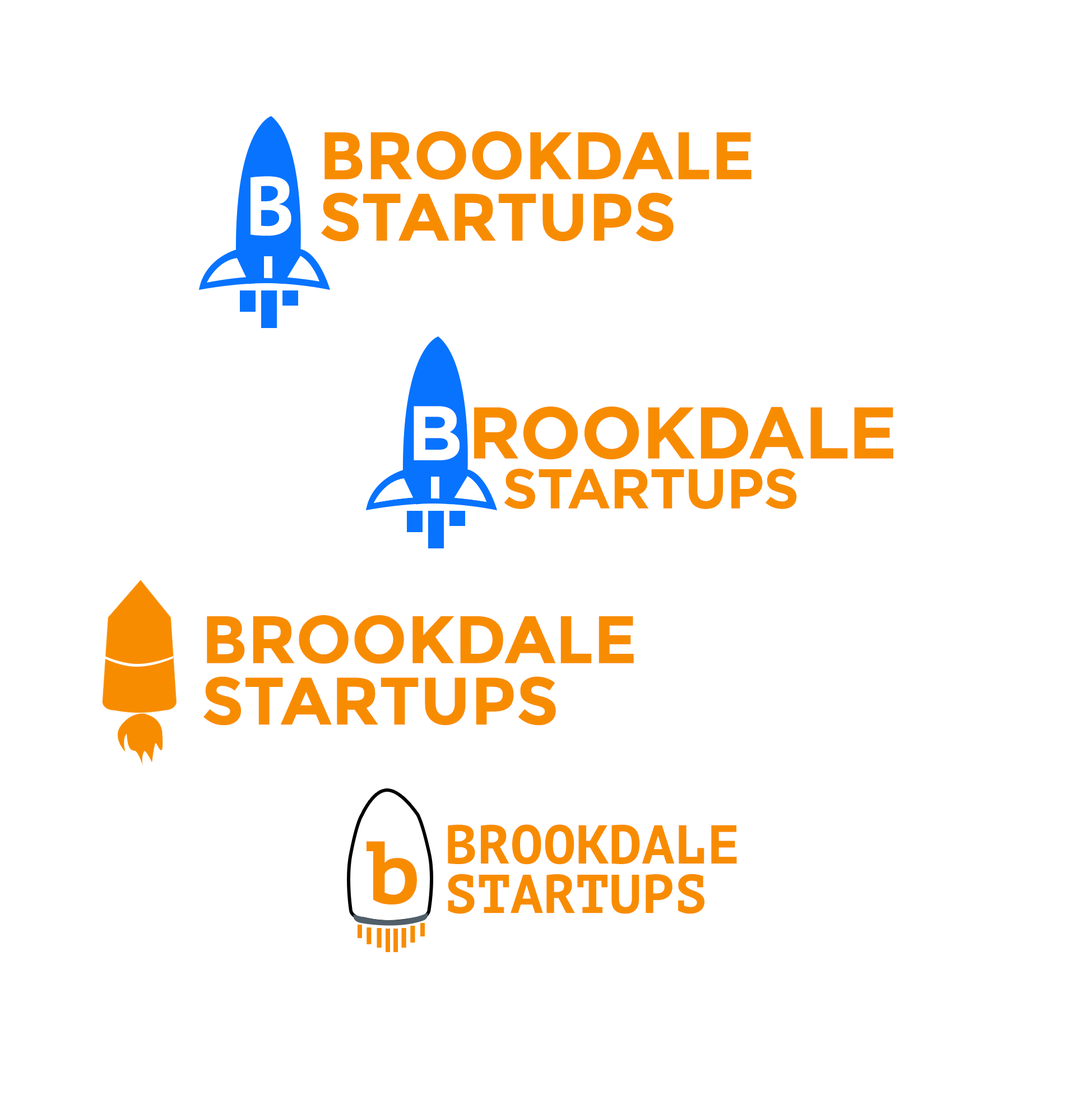
<style>
.page{position:relative;width:1076px;height:1108px;background:#ffffff}
.page>*{position:absolute;margin:0}
.t1{font:67px/61.5px "Montserrat-Bold";color:#f88c00}
.t2{font:82.2px "PTMono-Bold";color:#ffffff}
.t3{font:76.8px "Gotham-Bold";color:#ffffff}
.t4{font:72.9px "Gotham-Bold";color:#f88c00}
.t5{font:56.1px "Gotham-Bold";color:#f88c00}
.t6{font:54.7px/49.6px "PTMono-Bold";color:#f88c00;text-transform:uppercase}
.t7{font:88.4px "PTMono-Bold";color:#f88c00}
</style>
<div class="page">
<p class="t1" style="left:321px;top:131px;width:431px;height:111px">BROOKDALE<br>STARTUPS</p>
<p class="t2" style="left:251px;top:176px;width:41px;height:60px">B</p>
<p class="t3" style="left:414px;top:406px;width:46px;height:54px">B</p>
<p class="t4" style="left:474px;top:406px;width:420px;height:54px">ROOKDALE</p>
<p class="t5" style="left:504px;top:468px;width:293px;height:41px">STARTUPS</p>
<p class="t1" style="left:204px;top:615px;width:430px;height:110px">BROOKDALE<br>STARTUPS</p>
<p class="t6" style="left:448px;top:824px;width:289px;height:90px">Brookdale<br>Startups</p>
<p class="t7" style="left:367px;top:841px;width:50px;height:63px">b</p>
</div>
